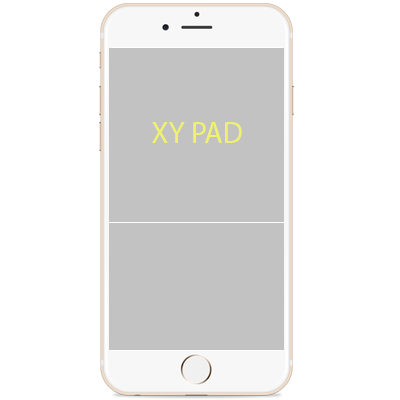
<style>
.page{position:relative;width:400px;height:400px;background:#ffffff}
.page>*{position:absolute;margin:0}
.t1{font:30px "MyriadPro-Regular";color:#f0f26d}
</style>
<div class="page">
<p class="t1" style="left:152px;top:122px;width:90px;height:21px">XY PAD</p>
</div>
